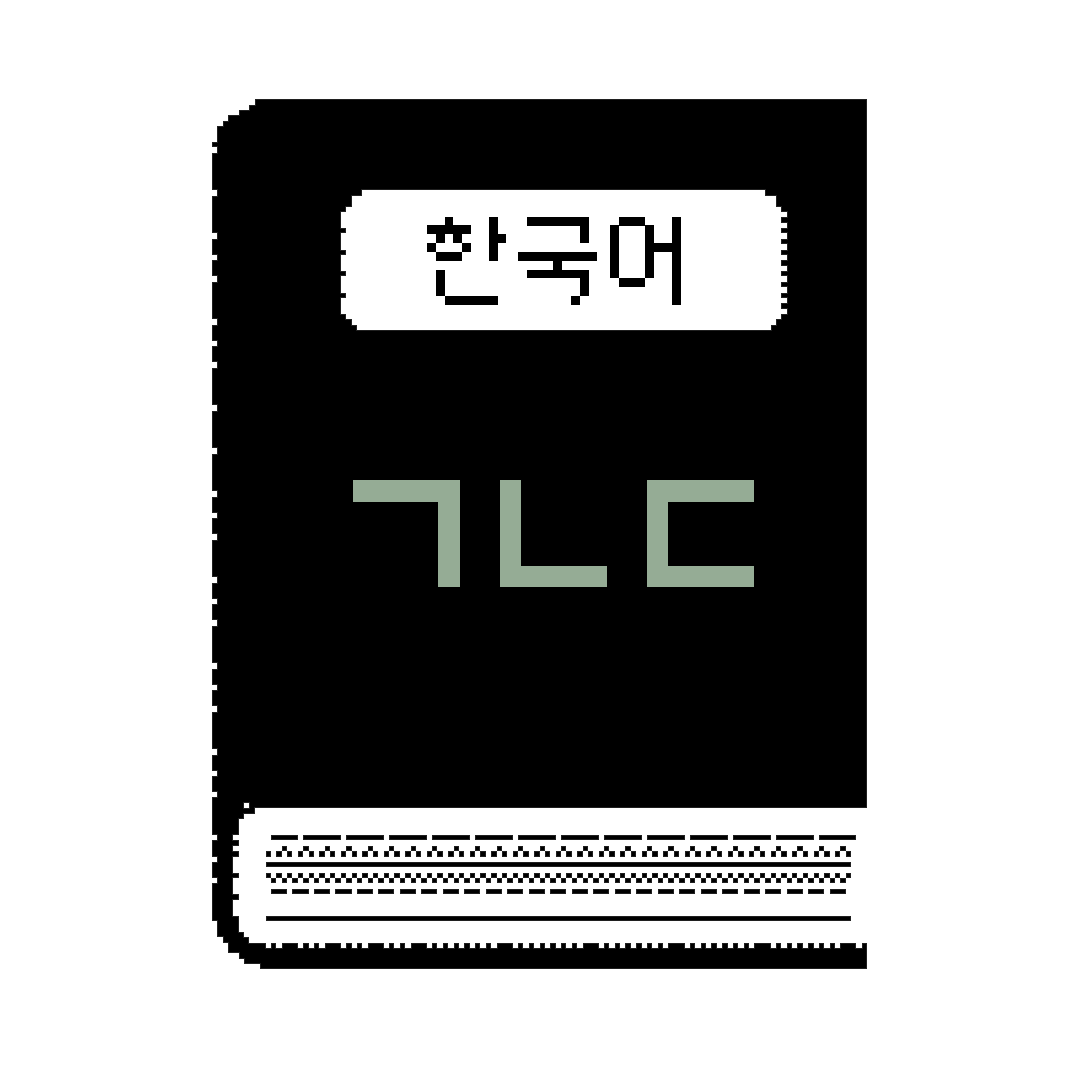
<style>
.page{position:relative;width:1080px;height:1080px;background:#ffffff}
.page>*{position:absolute;margin:0}
.t1{font:93.6px "soya_non8";letter-spacing:0.04em;color:#000000}
.t2{font:257px "morris9";letter-spacing:-0.26em;color:#95ac95}
</style>
<div class="page">
<p class="t1" style="left:427px;top:217px;width:254px;height:88px">한국어</p>
<p class="t2" style="left:353px;top:480px;width:401px;height:107px">ㄱㄴㄷ</p>
</div>
